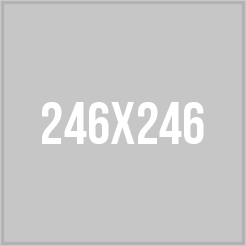
<style>
.page{position:relative;width:246px;height:246px;background:#c6c6c6}
.page>*{position:absolute;margin:0}
.t1{font:59px "BebasNeue";color:#ffffff}
</style>
<div class="page">
<p class="t1" style="left:42px;top:102px;width:162px;height:42px">246x246</p>
</div>
